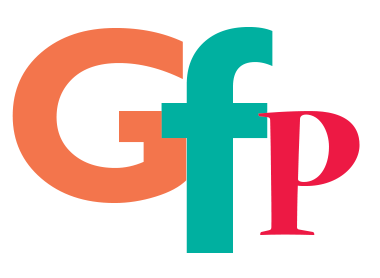
<style>
.page{position:relative;width:380px;height:278px;background:#ffffff}
.page>*{position:absolute;margin:0}
.t1{font:250px "GillSansMT-Bold";color:#f3754c}
.t2{font:250px "GillSansMT";color:#f3754c}
.t3{font:300px "MicrosoftNewTaiLue-Bold";color:#00b0a0}
.t4{font:200px "NuevaStd-Bold";color:#ed1944}
</style>
<div class="page">
<p class="t1" style="left:12px;top:28px;width:175px;height:175px"><span class="t2">   <br></span>G</p>
<p class="t3" style="left:161px;top:27px;width:112px;height:226px">f</p>
<p class="t4" style="left:258px;top:111px;width:102px;height:124px">P</p>
</div>
